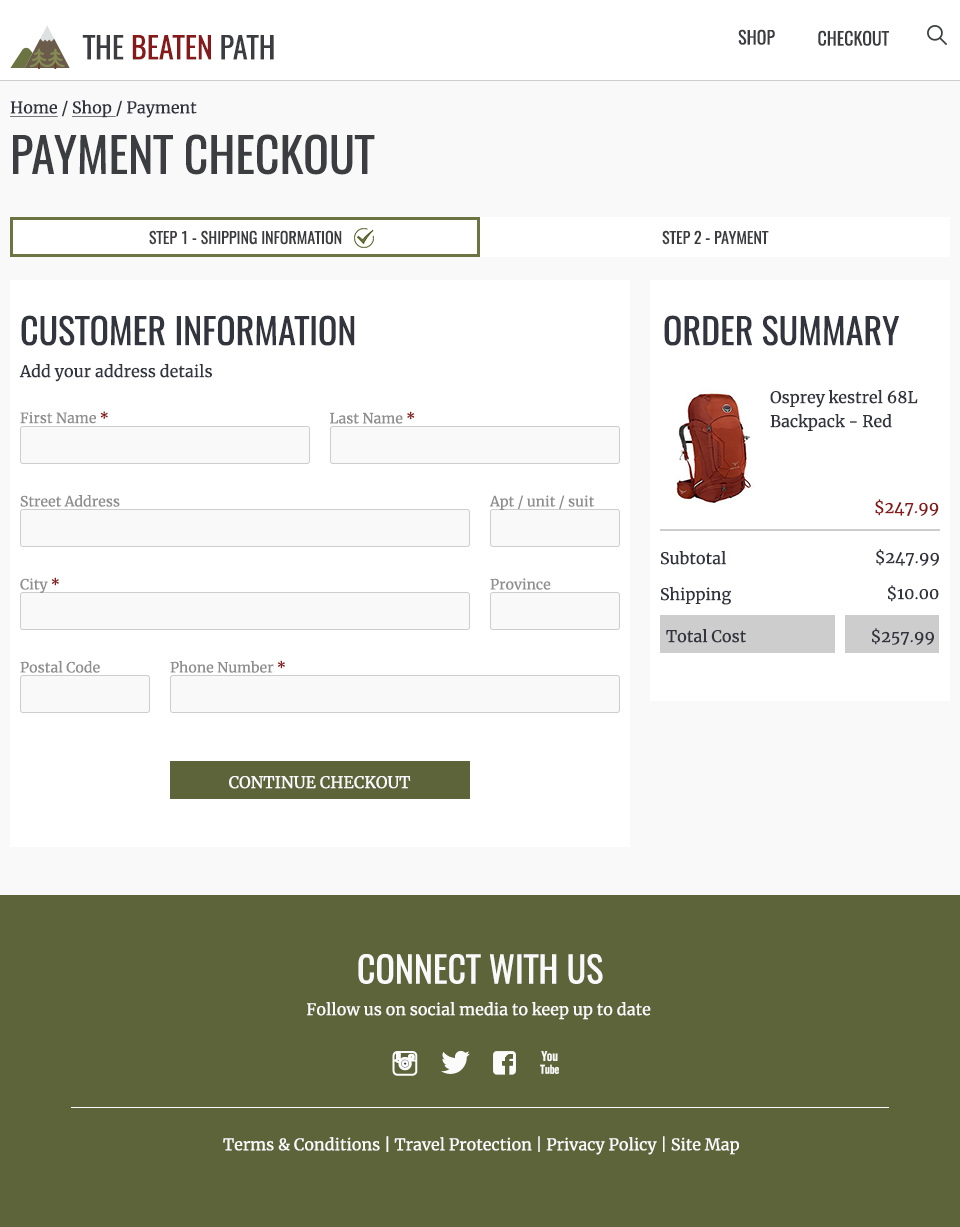
<style>
.page{position:relative;width:960px;height:1227px;background:#ffffff}
.page>*{position:absolute;margin:0}
.t1{font:18px "Oswald-Regular";color:#3c3d40;text-transform:uppercase}
.t2{font:30px "Oswald-Regular";color:#861919;text-transform:uppercase}
.t3{font:30px "Oswald-Regular";color:#3c3d40;text-transform:uppercase}
.t4{font:16px "Merriweather-Regular";color:#33353e}
.t5{font:16px "Merriweather-Regular";color:#33353e;text-decoration:underline}
.t6{font:48px "Oswald-Regular";color:#3c3d40;text-transform:uppercase}
.t7{font:16px/40px "Oswald-Regular";color:#3c3d40;text-transform:uppercase}
.t8{font:16px/72px "MyriadPro-Regular";color:#3c3d40;text-transform:uppercase}
.t9{font:16px "Oswald-Regular";color:#3c3d40;text-transform:uppercase}
.t10{font:36px "Oswald-Regular";color:#33353e;text-transform:uppercase}
.t11{font:16px/24px "Merriweather-Regular";color:#33353e}
.t12{font:14px "Merriweather-Regular";color:#8f8f8f}
.t13{font:14px "Merriweather-Regular";color:#861919}
.t14{font:14px/21px "Merriweather-Regular";color:#8f8f8f}
.t15{font:14px/21px "Merriweather-Regular";color:#861919}
.t16{font:14px/24px "Merriweather-Regular";color:#8f8f8f}
.t17{font:16px "Merriweather-Regular";color:#861919}
.t18{font:16px "Merriweather-Regular";color:#f9f9f9;text-transform:uppercase}
.t19{font:36px "Oswald-Regular";color:#f9f9f9;text-transform:uppercase}
.t20{font:16px "Merriweather-Regular";color:#f9f9f9}
</style>
<div class="page">
<p class="t1" style="left:738px;top:29px;width:37px;height:16px">Shop</p>
<p class="t1" style="left:818px;top:30px;width:71px;height:16px">Checkout</p>
<p class="t2" style="left:82px;top:35px;width:192px;height:25px"><span class="t3">The</span> Beaten <span class="t3">Path</span></p>
<p class="t4" style="left:10px;top:100px;width:187px;height:18px"><span class="t5">Home</span> / <span class="t5">Shop </span>/ Payment Checkout</p>
<p class="t6" style="left:13px;top:134px;width:362px;height:41px">Payment Checkout</p>
<p class="t7" style="left:149px;top:230px;width:193px;height:15px;text-align:center">Step 1 - Shipping Information<br><span class="t8"><br>formation</span></p>
<p class="t9" style="left:662px;top:230px;width:107px;height:15px">Step 2 - Payment</p>
<p class="t10" style="left:21px;top:315px;width:334px;height:31px">Customer Information</p>
<p class="t10" style="left:664px;top:315px;width:236px;height:31px">Order Summary</p>
<p class="t4" style="left:19px;top:363px;width:193px;height:19px">Add your address details below below</p>
<p class="t11" style="left:770px;top:389px;width:148px;height:42px">Osprey kestrel 68L Backpack - Red</p>
<p class="t12" style="left:20px;top:411px;width:88px;height:13px">First Name <span class="t13">*</span></p>
<p class="t14" style="left:330px;top:411px;width:85px;height:13px">Last Name <span class="t15">*<br></span><span class="t16">ame</span></p>
<p class="t12" style="left:20px;top:494px;width:100px;height:13px">Street Address <span class="t13">*</span></p>
<p class="t12" style="left:489px;top:495px;width:106px;height:15px">Apt / unit / suit #</p>
<p class="t17" style="left:875px;top:499px;width:64px;height:17px">$247.99</p>
<p class="t4" style="left:660px;top:550px;width:66px;height:15px">Subtotal</p>
<p class="t4" style="left:876px;top:549px;width:63px;height:17px">$247.99</p>
<p class="t12" style="left:20px;top:577px;width:39px;height:16px">City <span class="t13">*</span></p>
<p class="t12" style="left:490px;top:578px;width:61px;height:12px">Province <span class="t13">*</span></p>
<p class="t4" style="left:660px;top:586px;width:71px;height:19px">Shipping</p>
<p class="t4" style="left:888px;top:585px;width:51px;height:17px">$10.00</p>
<p class="t4" style="left:666px;top:628px;width:80px;height:15px">Total Cost</p>
<p class="t4" style="left:872px;top:628px;width:62px;height:17px">$257.99</p>
<p class="t12" style="left:20px;top:660px;width:80px;height:13px">Postal Code <span class="t13">*</span></p>
<p class="t12" style="left:170px;top:660px;width:115px;height:13px">Phone Number <span class="t13">*</span></p>
<p class="t18" style="left:229px;top:776px;width:182px;height:13px">Continue Checkout</p>
<p class="t19" style="left:358px;top:954px;width:245px;height:30px">Connect With Us</p>
<p class="t20" style="left:307px;top:1002px;width:344px;height:18px">Follow us on social media to keep up to date</p>
<p class="t20" style="left:223px;top:1136px;width:516px;height:19px">Terms &amp; Conditions | Travel Protection | Privacy Policy | Site Map</p>
</div>
